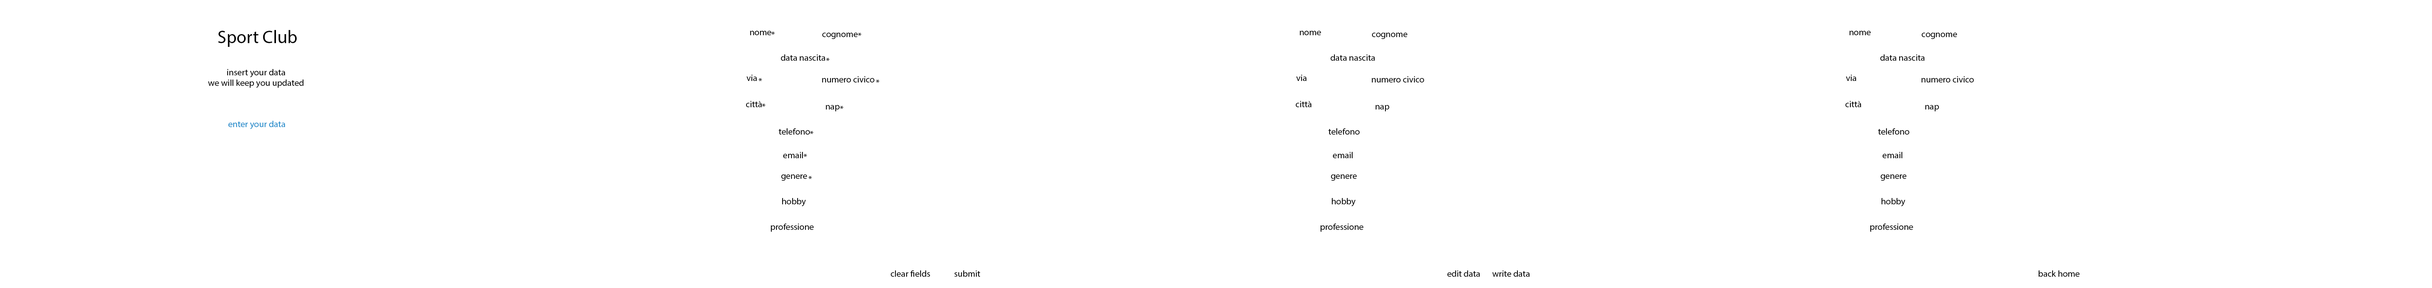
<style>
.page{position:relative;width:2432px;height:288px;background:#ffffff}
.page>*{position:absolute;margin:0}
.t1{font:18px "MyriadPro-Regular";color:#000000}
.t2{font:9px "MyriadPro-Regular";color:#000000}
.t3{font:9px "MyriadPro-Regular";color:#1f8aca}
</style>
<div class="page">
<p class="t1" style="left:218px;top:30px;width:79px;height:17px">Sport Club</p>
<p class="t2" style="left:750px;top:31px;width:21px;height:4px">nome</p>
<p class="t2" style="left:771px;top:32px;width:4px;height:3px">*</p>
<p class="t2" style="left:822px;top:33px;width:36px;height:6px">cognome</p>
<p class="t2" style="left:858px;top:33px;width:3px;height:3px">*</p>
<p class="t2" style="left:1300px;top:31px;width:21px;height:4px">nome</p>
<p class="t2" style="left:1372px;top:33px;width:36px;height:6px">cognome</p>
<p class="t2" style="left:1850px;top:31px;width:21px;height:4px">nome</p>
<p class="t2" style="left:1922px;top:33px;width:36px;height:6px">cognome</p>
<p class="t2" style="left:781px;top:54px;width:44px;height:7px">data nascita</p>
<p class="t2" style="left:826px;top:58px;width:4px;height:3px">*</p>
<p class="t2" style="left:1330px;top:54px;width:45px;height:7px">data nascita</p>
<p class="t2" style="left:1880px;top:54px;width:45px;height:7px">data nascita</p>
<p class="t2" style="left:208px;top:69px;width:96px;height:19px;text-align:center">insert your data<br>we will keep you updated</p>
<p class="t2" style="left:747px;top:75px;width:10px;height:6px">via</p>
<p class="t2" style="left:759px;top:78px;width:3px;height:3px">*</p>
<p class="t2" style="left:822px;top:76px;width:52px;height:6px">numero civico</p>
<p class="t2" style="left:1296px;top:75px;width:11px;height:6px">via</p>
<p class="t2" style="left:1372px;top:76px;width:52px;height:6px">numero civico</p>
<p class="t2" style="left:1846px;top:75px;width:11px;height:6px">via</p>
<p class="t2" style="left:1922px;top:76px;width:52px;height:6px">numero civico</p>
<p class="t2" style="left:876px;top:80px;width:3px;height:3px">*</p>
<p class="t2" style="left:746px;top:101px;width:16px;height:6px">città</p>
<p class="t2" style="left:1296px;top:101px;width:16px;height:6px">città</p>
<p class="t2" style="left:1845px;top:101px;width:17px;height:6px">città</p>
<p class="t2" style="left:762px;top:104px;width:3px;height:3px">*</p>
<p class="t2" style="left:826px;top:105px;width:14px;height:6px">nap</p>
<p class="t2" style="left:840px;top:106px;width:3px;height:3px">*</p>
<p class="t2" style="left:1376px;top:105px;width:13px;height:6px">nap</p>
<p class="t2" style="left:1925px;top:105px;width:14px;height:6px">nap</p>
<p class="t3" style="left:228px;top:121px;width:57px;height:8px">enter your data</p>
<p class="t2" style="left:778px;top:128px;width:32px;height:7px">telefono</p>
<p class="t2" style="left:810px;top:131px;width:3px;height:3px">*</p>
<p class="t2" style="left:1328px;top:128px;width:32px;height:7px">telefono</p>
<p class="t2" style="left:1878px;top:128px;width:32px;height:7px">telefono</p>
<p class="t2" style="left:783px;top:152px;width:20px;height:6px">email</p>
<p class="t2" style="left:804px;top:154px;width:3px;height:3px">*</p>
<p class="t2" style="left:1333px;top:152px;width:20px;height:6px">email</p>
<p class="t2" style="left:1882px;top:152px;width:21px;height:6px">email</p>
<p class="t2" style="left:781px;top:174px;width:26px;height:7px">genere</p>
<p class="t2" style="left:808px;top:176px;width:4px;height:3px">*</p>
<p class="t2" style="left:1331px;top:174px;width:26px;height:7px">genere</p>
<p class="t2" style="left:1881px;top:174px;width:26px;height:7px">genere</p>
<p class="t2" style="left:782px;top:198px;width:24px;height:8px">hobby</p>
<p class="t2" style="left:1332px;top:198px;width:24px;height:8px">hobby</p>
<p class="t2" style="left:1882px;top:198px;width:23px;height:8px">hobby</p>
<p class="t2" style="left:771px;top:224px;width:43px;height:8px">professione</p>
<p class="t2" style="left:1321px;top:224px;width:43px;height:8px">professione</p>
<p class="t2" style="left:1870px;top:224px;width:43px;height:8px">professione</p>
<p class="t2" style="left:891px;top:270px;width:39px;height:7px">clear fields</p>
<p class="t2" style="left:954px;top:270px;width:26px;height:7px">submit</p>
<p class="t2" style="left:1448px;top:270px;width:32px;height:7px">edit data</p>
<p class="t2" style="left:1492px;top:270px;width:38px;height:7px">write data</p>
<p class="t2" style="left:2039px;top:270px;width:41px;height:7px">back home</p>
</div>
